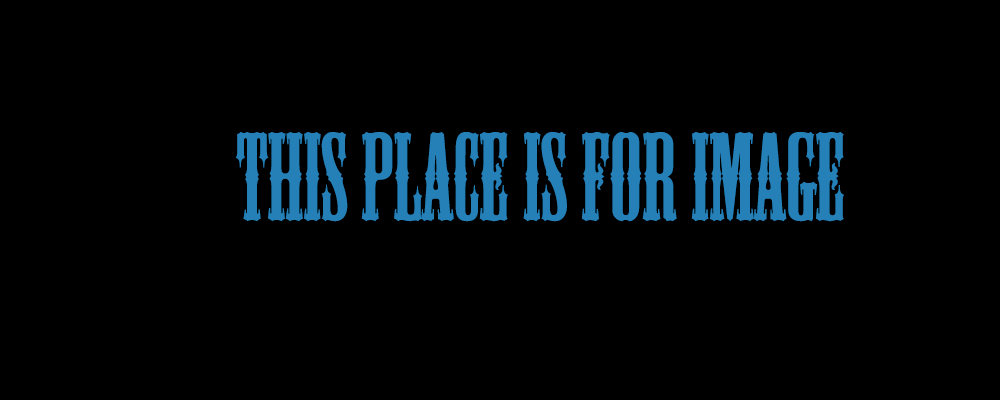
<style>
.page{position:relative;width:1000px;height:400px;background:#000000}
.page>*{position:absolute;margin:0}
.t1{font:116px "MesquiteStd";color:#2580b7}
</style>
<div class="page">
<p class="t1" style="left:235px;top:132px;width:609px;height:90px">This place is for Image</p>
</div>
